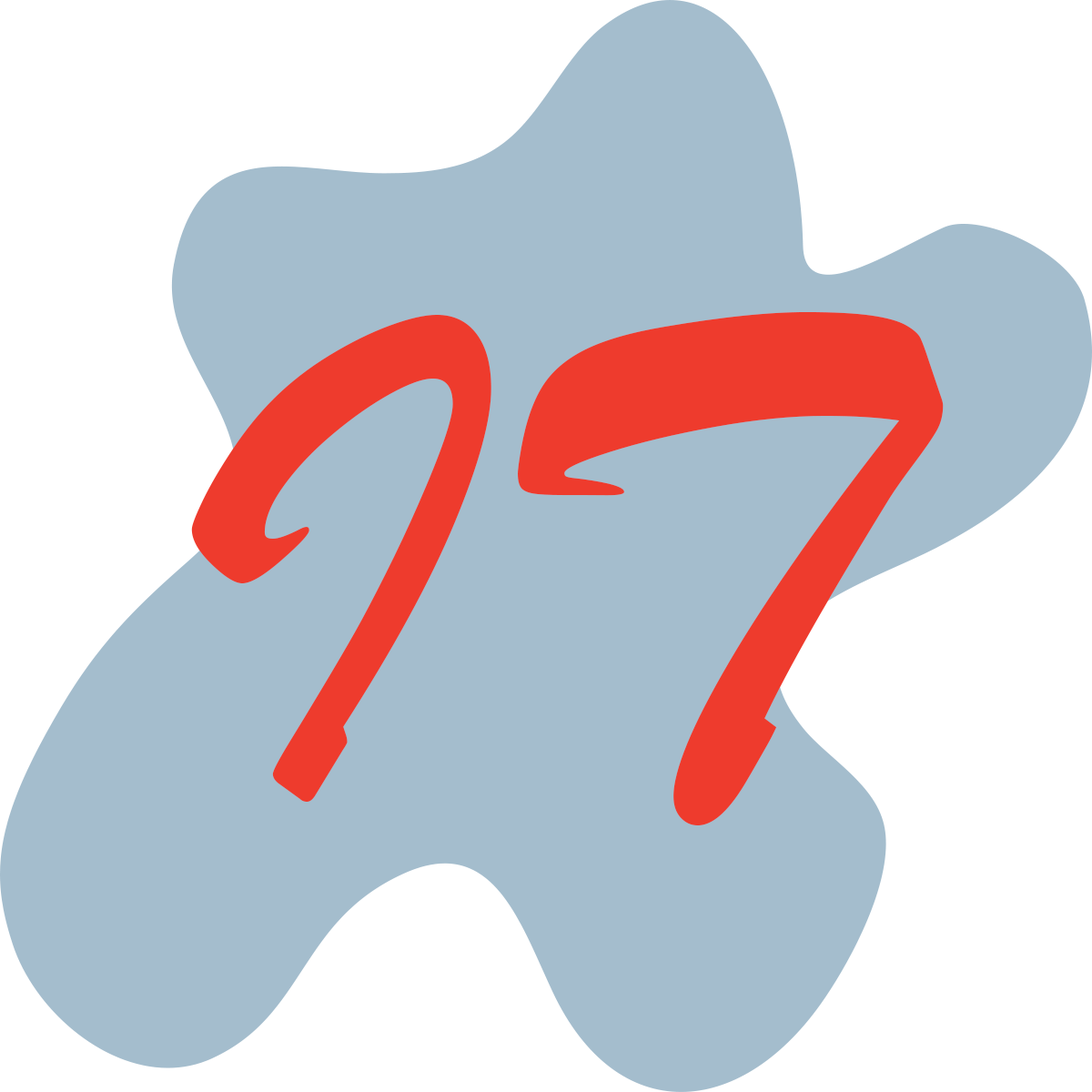
<style>
.page{position:relative;width:1092px;height:1092px;background:#a4bdcd}
.page>*{position:absolute;margin:0}
.t1{font:728px "BrushScriptMT";letter-spacing:-0.02em;color:#ee3b2d}
</style>
<div class="page">
<p class="t1" style="left:191px;top:312px;width:753px;height:513px">IT</p>
</div>
